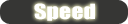
<style>
.page{position:relative;width:128px;height:24px;background:#363634}
.page>*{position:absolute;margin:0}
.t1{font:19.2px "Impact";color:#ffffff;scale:1.25 1}
</style>
<div class="page">
<p class="t1" style="left:34px;top:3px;width:61px;height:18px">Speed</p>
</div>
